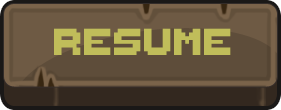
<style>
.page{position:relative;width:281px;height:110px}
.page>*{position:absolute;margin:0}
.t1{font:60px "ThaleahFat";color:#c0bd5a}
</style>
<div class="page">
<p class="t1" style="left:54px;top:28px;width:177px;height:27px">Resume</p>
</div>
